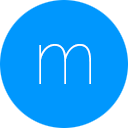
<style>
.page{position:relative;width:128px;height:128px;background:#0097fd}
.page>*{position:absolute;margin:0}
.t1{font:75px "Raleway-Thin";color:#ffffff;scale:0.92 1}
</style>
<div class="page">
<p class="t1" style="left:39px;top:44px;width:52px;height:40px">m</p>
</div>
